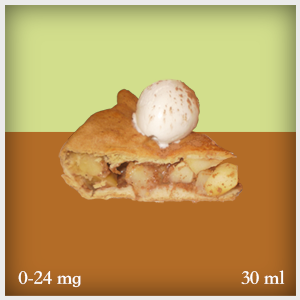
<style>
.page{position:relative;width:300px;height:300px}
.page>*{position:absolute;margin:0}
.t1{font:20px "STSongti-TC-Bold";letter-spacing:-0.01em;color:#ffffff}
</style>
<div class="page">
<p class="t1" style="left:241px;top:270px;width:44px;height:15px">30 ml</p>
<p class="t1" style="left:18px;top:271px;width:63px;height:17px">0-24 mg</p>
</div>
